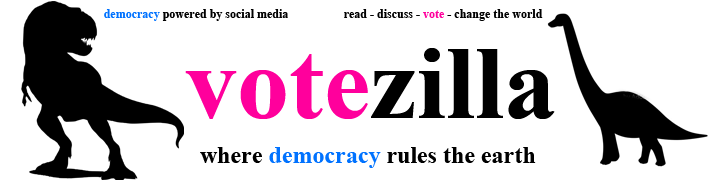
<style>
.page{position:relative;width:720px;height:180px;background:#ffffff}
.page>*{position:absolute;margin:0}
.t1{font:12px "TimesNewRomanPS-BoldMT";color:#000000}
.t2{font:12px "TimesNewRomanPS-BoldMT";color:#0072ff}
.t3{font:12px "TimesNewRomanPS-BoldMT";color:#ff009c}
.t4{font:104.5px "TimesNewRomanPS-BoldMT";color:#000000}
.t5{font:104.5px "TimesNewRomanPS-BoldMT";color:#ff009c}
.t6{font:24px "TimesNewRomanPS-BoldMT";color:#000000}
.t7{font:24px "TimesNewRomanPS-BoldMT";color:#0072ff}
</style>
<div class="page">
<p class="t1" style="left:104px;top:9px;width:184px;height:12px"><span class="t2">democracy</span> powered by social media</p>
<p class="t1" style="left:344px;top:9px;width:199px;height:12px">read - discuss - <span class="t3">vote</span> - change the world</p>
<p class="t4" style="left:185px;top:48px;width:370px;height:71px"><span class="t5">vote</span>zilla</p>
<p class="t6" style="left:200px;top:147px;width:336px;height:21px">where <span class="t7">democracy</span> rules the earth</p>
</div>
